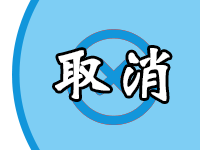
<style>
.page{position:relative;width:200px;height:150px;background:#7ecef4}
.page>*{position:absolute;margin:0}
.t1{font:60px "Weibei-SC-Bold";letter-spacing:0.06em;color:#ffffff;font-weight:bold}
</style>
<div class="page">
<p class="t1" style="left:55px;top:48px;width:115px;height:53px">取消</p>
</div>
